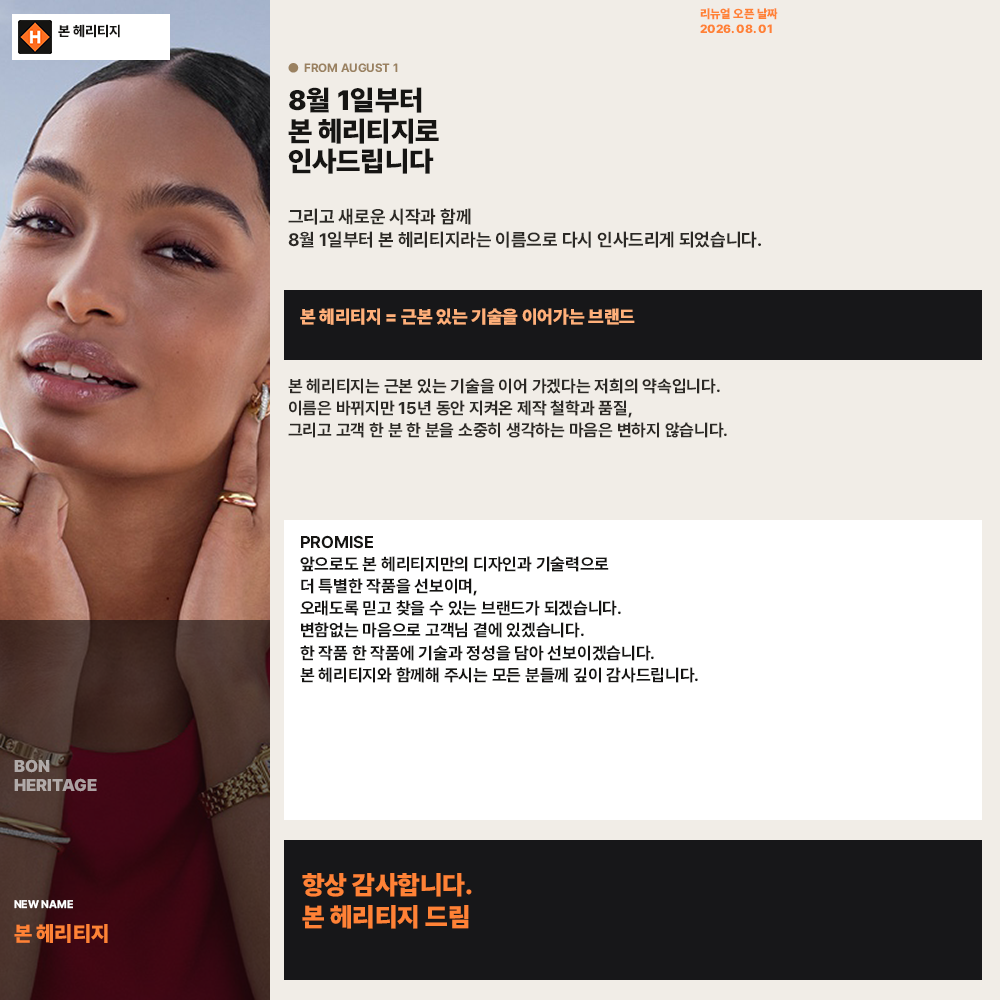
<style>
.page{position:relative;width:1000px;height:1000px;background:#f1ede7}
.page>*{position:absolute;margin:0}
.t1{font:12px/15px "Pretendard-Black";color:#ff8236}
.t2{font:14px "Pretendard-ExtraBold";color:#161513}
.t3{font:12px "Pretendard-Bold";color:#9a8160}
.t4{font:28px/30.8px "Pretendard-Black";color:#161513}
.t5{font:18px/23px "Pretendard-Bold";color:#2c2925}
.t6{font:18px "Pretendard-Black";color:#ffb07a}
.t7{font:17px/21.8px "Pretendard-Bold";color:#2c2925}
.t8{font:17px/22.1px "Pretendard-Bold";color:#161513}
.t9{font:17px/19px "Pretendard-Black";color:#b1aaa9}
.t10{font:26px/31.2px "Pretendard-Black";color:#ff8236}
.t11{font:11px "Pretendard-Bold";color:#ffffff}
.t12{font:21px "Pretendard-Black";color:#ff8236}
</style>
<div class="page">
<p class="t1" style="left:700px;top:8px;width:78px;height:26px">리뉴얼 오픈 날짜<br>2026. 08. 01</p>
<p class="t2" style="left:58px;top:24px;width:62px;height:14px">본 헤리티지</p>
<p class="t3" style="left:288px;top:63px;width:110px;height:10px">●  FROM AUGUST 1</p>
<p class="t4" style="left:288px;top:87px;width:151px;height:87px">8월 1일부터<br>본 헤리티지로<br>인사드립니다</p>
<p class="t5" style="left:288px;top:208px;width:473px;height:40px">그리고 새로운 시작과 함께<br>8월 1일부터 본 헤리티지라는 이름으로 다시 인사드리게 되었습니다.</p>
<p class="t6" style="left:300px;top:308px;width:335px;height:17px">본 헤리티지 = 근본 있는 기술을 이어가는 브랜드</p>
<p class="t7" style="left:288px;top:378px;width:439px;height:60px">본 헤리티지는 근본 있는 기술을 이어 가겠다는 저희의 약속입니다.<br>이름은 바뀌지만 15년 동안 지켜온 제작 철학과 품질,<br>그리고 고객 한 분 한 분을 소중히 생각하는 마음은 변하지 않습니다.</p>
<p class="t8" style="left:300px;top:535px;width:398px;height:148px">PROMISE<br>앞으로도 본 헤리티지만의 디자인과 기술력으로<br>더 특별한 작품을 선보이며,<br>오래도록 믿고 찾을 수 있는 브랜드가 되겠습니다.<br>변함없는 마음으로 고객님 곁에 있겠습니다.<br>한 작품 한 작품에 기술과 정성을 담아 선보이겠습니다.<br>본 헤리티지와 함께해 주시는 모든 분들께 깊이 감사드립니다.</p>
<p class="t9" style="left:14px;top:759px;width:83px;height:33px">BON<br>HERITAGE</p>
<p class="t10" style="left:302px;top:873px;width:170px;height:56px">항상 감사합니다.<br>본 헤리티지 드림</p>
<p class="t11" style="left:14px;top:900px;width:59px;height:9px">NEW NAME</p>
<p class="t12" style="left:14px;top:924px;width:94px;height:19px">본 헤리티지</p>
</div>
